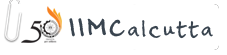
<style>
.page{position:relative;width:227px;height:55px;background:#ffffff}
.page>*{position:absolute;margin:0}
.t1{font:27px "Ampersand";letter-spacing:0.06em;color:#39444f}
</style>
<div class="page">
<p class="t1" style="left:69px;top:18px;width:144px;height:21px">IIMCalcutta</p>
</div>
